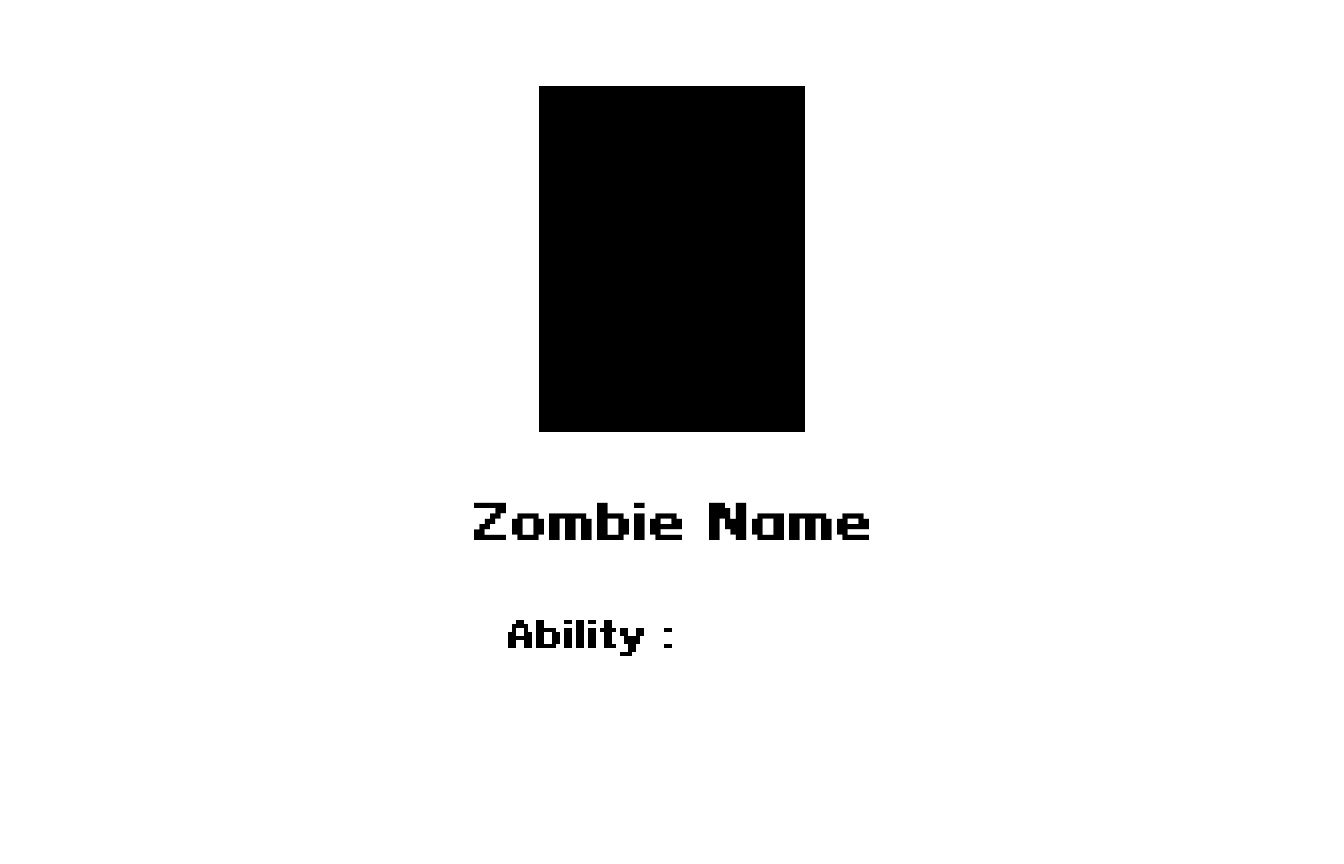
<style>
.page{position:relative;width:1344px;height:864px;background:#ffffff}
.page>*{position:absolute;margin:0}
.t1{font:48px "PixeloidSans-Bold";color:#000000}
.t2{font:36px "PixeloidSans-Bold";color:#000000}
</style>
<div class="page">
<p class="t1" style="left:474px;top:502px;width:395px;height:38px">Zombie Name</p>
<p class="t2" style="left:508px;top:620px;width:164px;height:36px">Ability :</p>
</div>
